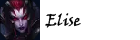
<style>
.page{position:relative;width:140px;height:40px;background:#ffffff}
.page>*{position:absolute;margin:0}
.t1{font:12px "VinerHandITC";color:#000000}
</style>
<div class="page">
<p class="t1" style="left:45px;top:13px;width:36px;height:15px">Elise</p>
</div>
